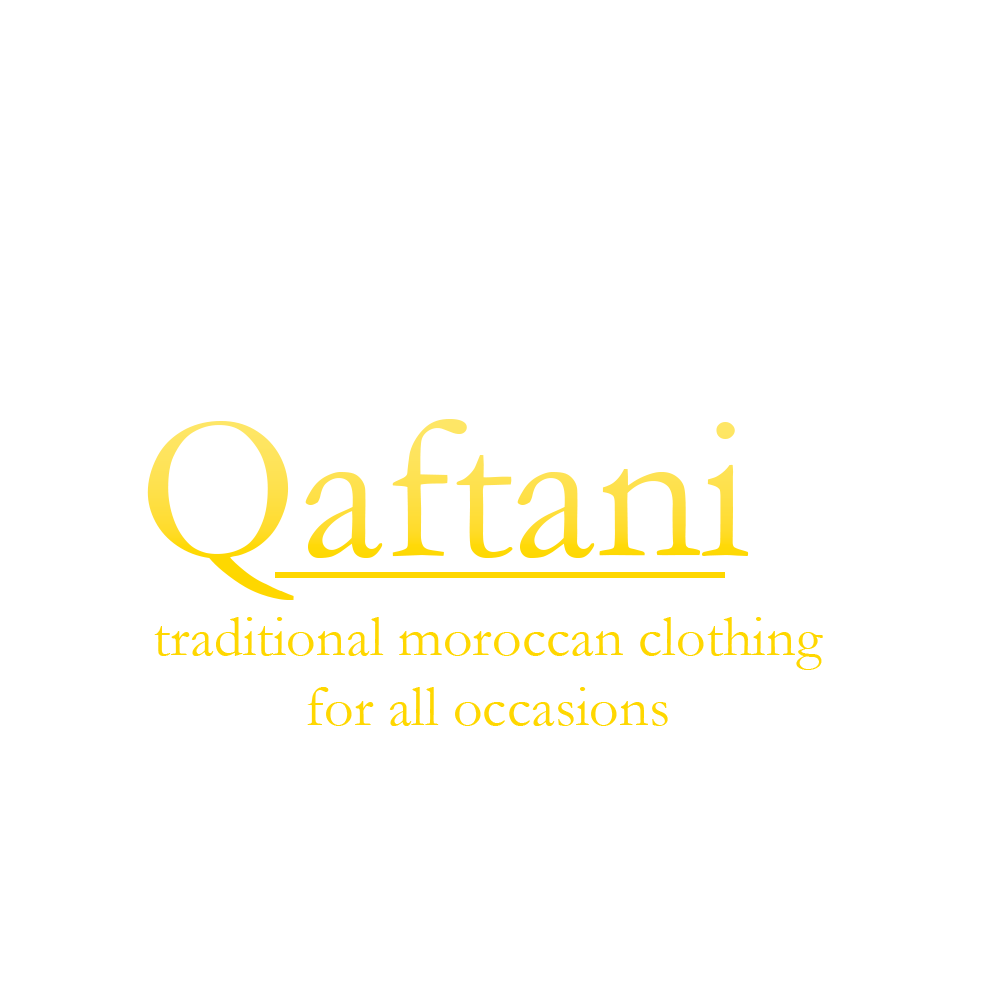
<style>
.page{position:relative;width:1000px;height:1000px;background:#ffffff}
.page>*{position:absolute;margin:0}
.t1{font:208.3px "Garamond"}
.t2{font:58.3px "Garamond";color:#ffd700}
</style>
<div class="page">
<p class="t1" style="left:147px;top:419px;width:602px;height:181px">Qaftani</p>
<p class="t2" style="left:154px;top:617px;width:669px;height:109px;text-align:center">traditional moroccan clothing<br> for all occasions</p>
</div>
